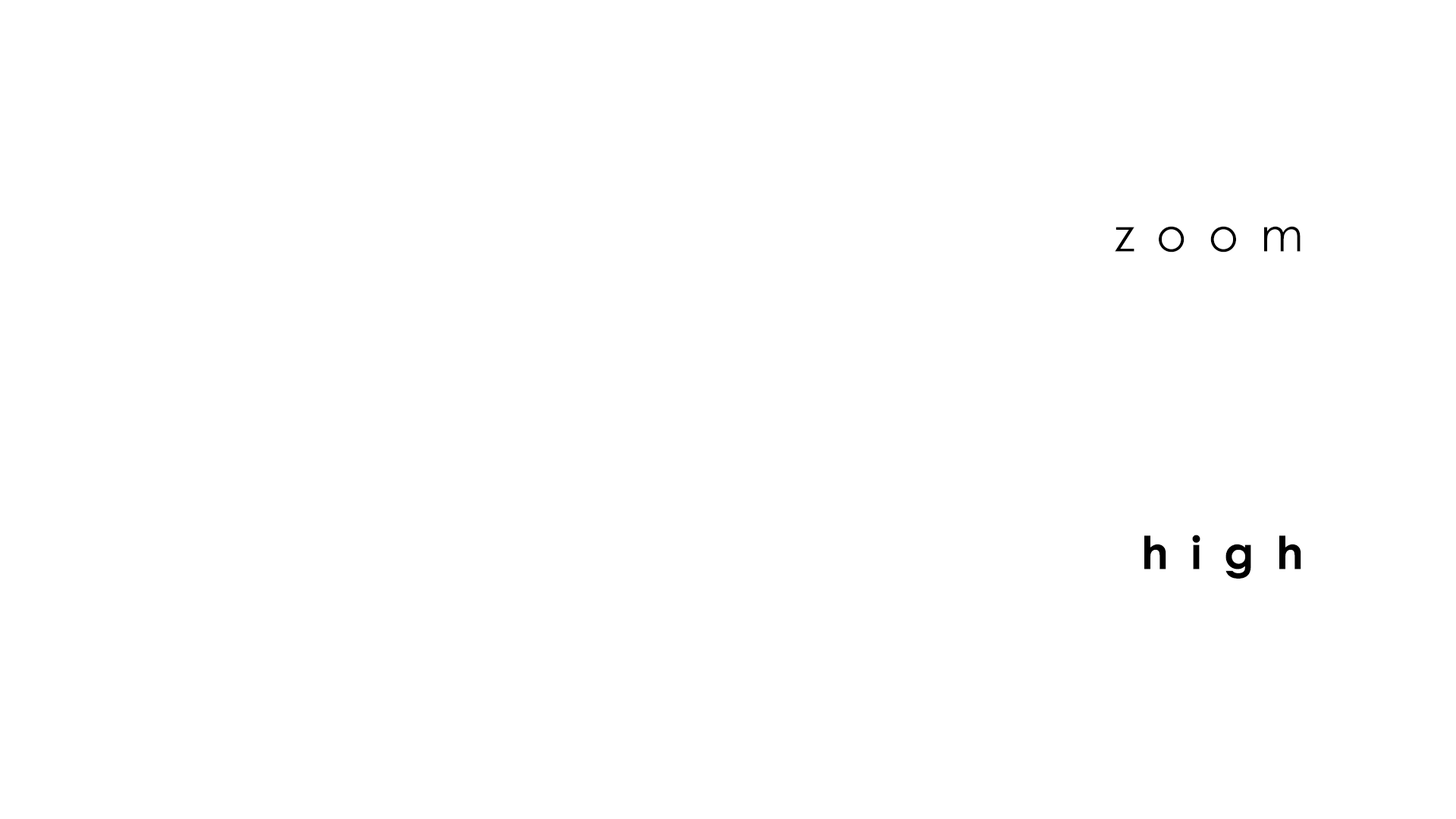
<style>
.page{position:relative;width:1456px;height:819px;background:#ffffff}
.page>*{position:absolute;margin:0}
.t1{font:45.5px "CenturyGothic";letter-spacing:0.49em;color:#000000}
.t2{font:45.5px "CenturyGothic-Bold";letter-spacing:0.49em;color:#000000}
</style>
<div class="page">
<p class="t1" style="left:1115px;top:226px;width:186px;height:27px">zoom</p>
<p class="t2" style="left:1144px;top:535px;width:157px;height:44px">high</p>
</div>
